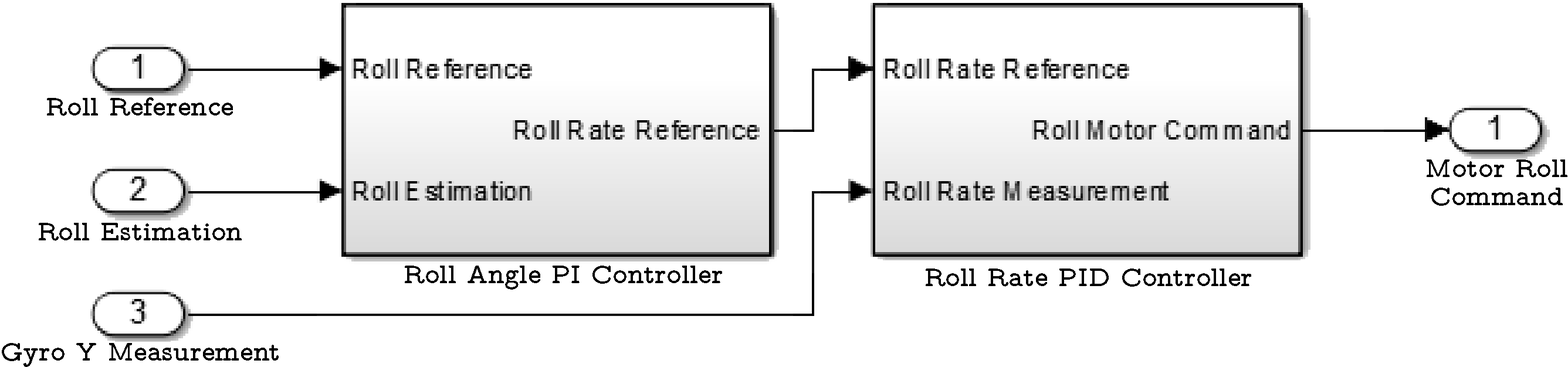
<style>
.page{position:relative;width:1568px;height:367px;background:#ffffff}
.page>*{position:absolute;margin:0}
.t1{font:48.9px "LMMonoPropLt10-Bold";color:#000000}
</style>
<div class="page">
<p class="t1" style="left:47px;top:97px;width:186px;height:19px">Roll Reference</p>
<p class="t1" style="left:1427px;top:160px;width:140px;height:46px;text-align:center">Motor Roll<br>Command</p>
<p class="t1" style="left:39px;top:223px;width:203px;height:18px">Roll Estimation</p>
<p class="t1" style="left:405px;top:266px;width:317px;height:24px">Roll Angle PI Controller</p>
<p class="t1" style="left:926px;top:269px;width:325px;height:18px">Roll Rate PID Controller</p>
<p class="t1" style="left:2px;top:343px;width:277px;height:24px">Gyro Y Measurement</p>
</div>
